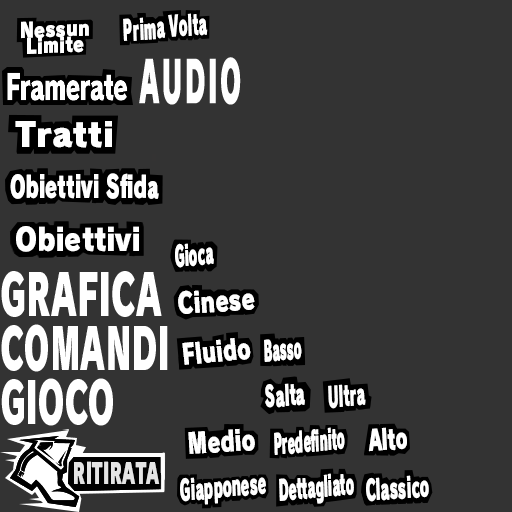
<style>
.page{position:relative;width:512px;height:512px;background:#333333}
.page>*{position:absolute;margin:0}
.t1{font:28px "RodinHimawariPro-UB";color:#ffffff;scale:0.47 1}
.t2{font:20.5px/16px "RodinHimawariPro-UB";color:#ffffff;scale:0.84 1}
.t3{font:33.5px "RodinHimawariPro-UB";color:#ffffff}
.t4{font:30.2px "RodinHimawariPro-UB";color:#ffffff;scale:0.63 1}
.t5{font:31.5px "RodinHimawariPro-UB";color:#ffffff;scale:0.86 1}
.t6{font:28px "RodinHimawariPro-UB";color:#ffffff;scale:0.45 1}
.t7{font:56.5px "RodinHimawariPro-UB";color:#ffffff;scale:0.58 1}
.t8{font:28.2px "RodinHimawariPro-UB";color:#ffffff;scale:0.75 1}
.t9{font:56.5px "RodinHimawariPro-UB";color:#ffffff;scale:0.56 1}
.t10{font:28px "RodinHimawariPro-UB";color:#ffffff;scale:0.72 1}
.t11{font:28px "RodinHimawariPro-UB";color:#ffffff;scale:0.41 1}
.t12{font:28px "RodinHimawariPro-UB";color:#ffffff;scale:0.52 1}
.t13{font:28px "RodinHimawariPro-UB";color:#ffffff;scale:0.49 1}
.t14{font:28px "RodinHimawariPro-UB";color:#ffffff;scale:0.74 1}
.t15{font:28px "RodinHimawariPro-UB";color:#ffffff;scale:0.42 1}
.t16{font:28px "RodinHimawariPro-UB";color:#ffffff;scale:0.63 1}
.t17{font:28px "RodinHimawariPro-UB";color:#e4e4e4;scale:0.6 1}
.t18{font:28px "RodinHimawariPro-UB";color:#ffffff;scale:0.5 1}
</style>
<div class="page">
<p class="t1" style="left:123px;top:13px;width:85px;height:28px;rotate:-5deg">Prima Volta</p>
<p class="t2" style="left:21px;top:21px;width:68px;height:33px;text-align:center;rotate:-2deg">Nessun<br>Limite</p>
<p class="t3" style="left:15px;top:121px;width:97px;height:27px">Tratti</p>
<p class="t4" style="left:10px;top:173px;width:149px;height:26px">Obiettivi Sfida</p>
<p class="t5" style="left:16px;top:226px;width:123px;height:26px">Obiettivi</p>
<p class="t6" style="left:175px;top:243px;width:39px;height:25px;rotate:-5deg">Gioca</p>
<p class="t7" style="left:1px;top:271px;width:161px;height:46px">GRAFICA</p>
<p class="t8" style="left:178px;top:290px;width:77px;height:24px;rotate:-4deg">Cinese</p>
<p class="t9" style="left:1px;top:324px;width:167px;height:48px">COMANDI</p>
<p class="t10" style="left:182px;top:338px;width:69px;height:27px;rotate:-6deg">Fluido</p>
<p class="t11" style="left:264px;top:339px;width:38px;height:23px;rotate:-6deg">Basso</p>
<p class="t9" style="left:1px;top:378px;width:112px;height:48px">GIOCO</p>
<p class="t12" style="left:265px;top:383px;width:40px;height:25px;rotate:-5deg">Salta</p>
<p class="t13" style="left:328px;top:384px;width:38px;height:25px;rotate:-5deg">Ultra</p>
<p class="t14" style="left:188px;top:428px;width:67px;height:26px;rotate:-3deg">Medio</p>
<p class="t15" style="left:274px;top:427px;width:71px;height:28px;rotate:-6deg">Predefinito</p>
<p class="t16" style="left:368px;top:427px;width:39px;height:25px;rotate:-4deg">Alto</p>
<p class="t17" style="left:74px;top:461px;width:86px;height:23px">RITIRATA</p>
<p class="t6" style="left:279px;top:473px;width:75px;height:31px;rotate:-5deg">Dettagliato</p>
<p class="t13" style="left:180px;top:477px;width:86px;height:28px;rotate:-5deg">Giapponese</p>
<p class="t18" style="left:366px;top:475px;width:63px;height:27px;rotate:-5deg">Classico</p>
</div>
